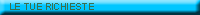
<style>
.page{position:relative;width:200px;height:15px;background:#00c6ff}
.page>*{position:absolute;margin:0}
.t1{font:10px "ArialMT";letter-spacing:-0.06em;color:#3c6f4e}
</style>
<div class="page">
<p class="t1" style="left:10px;top:3px;width:84px;height:7px">LE TUE RICHIESTE</p>
</div>
